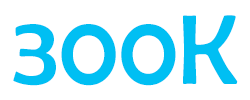
<style>
.page{position:relative;width:250px;height:100px;background:#ffffff}
.page>*{position:absolute;margin:0}
.t1{font:100px "BerlinSansFB-Reg";color:#00bff3}
</style>
<div class="page">
<p class="t1" style="left:13px;top:15px;width:225px;height:71px">300K</p>
</div>
